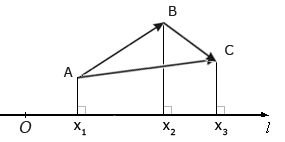
<style>
.page{position:relative;width:285px;height:142px;background:#ffffff}
.page>*{position:absolute;margin:0}
.t1{font:13.7px "Verdana";color:#1f1f1f}
.t2{font:16.5px "Verdana";color:#1f1f1f;font-style:italic}
.t3{font:13.7px "Verdana";color:#000000}
</style>
<div class="page">
<p class="t1" style="left:169px;top:6px;width:8px;height:10px">B</p>
<p class="t1" style="left:225px;top:45px;width:9px;height:10px">C</p>
<p class="t1" style="left:63px;top:67px;width:10px;height:10px">A</p>
<p class="t2" style="left:19px;top:121px;width:13px;height:12px">O</p>
<p class="t3" style="left:73px;top:122px;width:13px;height:14px">x1</p>
<p class="t3" style="left:162px;top:122px;width:14px;height:14px">x2</p>
<p class="t3" style="left:214px;top:122px;width:14px;height:14px">x3</p>
</div>
